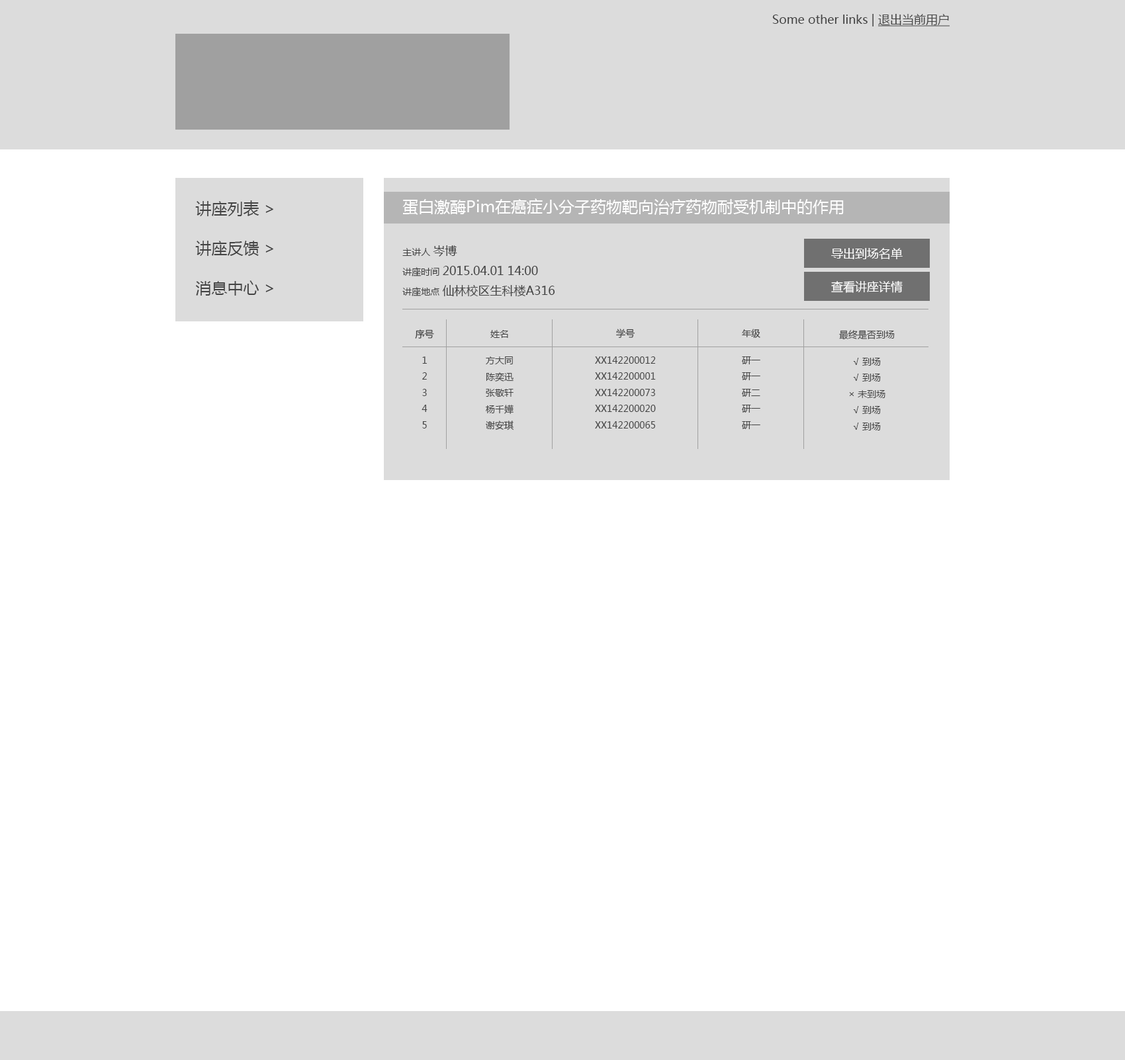
<style>
.page{position:relative;width:1125px;height:1060px;background:#ffffff}
.page>*{position:absolute;margin:0}
.t1{font:11.9px "MicrosoftYaHei";color:#434343}
.t2{font:11.9px "MicrosoftYaHei";color:#434343;text-decoration:underline}
.t3{font:15.9px/39.7px "MicrosoftYaHei";color:#434343}
.t4{font:15.9px "MicrosoftYaHei";color:#ffffff}
.t5{font:11.9px/19.8px "MicrosoftYaHei";color:#434343}
.t6{font:9.3px/19.8px "MicrosoftYaHei";color:#434343}
.t7{font:11.9px/15.9px "MicrosoftYaHei";color:#434343}
.t8{font:11.9px "MicrosoftYaHei";color:#ffffff}
.t9{font:9.3px "MicrosoftYaHei";color:#434343}
</style>
<div class="page">
<p class="t1" style="left:772px;top:14px;width:177px;height:12px">Some other links | <span class="t2">退出当前用户</span></p>
<p class="t3" style="left:195px;top:200px;width:78px;height:96px">讲座列表 &gt;<br>讲座反馈 &gt;<br>消息中心 &gt;</p>
<p class="t4" style="left:402px;top:198px;width:441px;height:17px">蛋白激酶Pim在癌症小分子药物靶向治疗药物耐受机制中的作用</p>
<p class="t5" style="left:402px;top:245px;width:153px;height:51px"><span class="t6">主讲人 </span><span class="t7">岑博</span><span class="t6"><br>讲座时间 </span>2015.04.01 14:00<br><span class="t6">讲座地点 </span>仙林校区生科楼A316</p>
<p class="t8" style="left:831px;top:248px;width:71px;height:11px">导出到场名单</p>
<p class="t8" style="left:831px;top:280px;width:71px;height:13px">查看讲座详情</p>
<p class="t9" style="left:415px;top:329px;width:19px;height:10px">序号</p>
<p class="t9" style="left:616px;top:329px;width:19px;height:9px">学号</p>
<p class="t9" style="left:742px;top:329px;width:18px;height:9px">年级</p>
<p class="t9" style="left:490px;top:330px;width:18px;height:8px">姓名</p>
<p class="t9" style="left:839px;top:330px;width:55px;height:10px">最终是否到场</p>
<p class="t9" style="left:421px;top:357px;width:6px;height:72px;text-align:center">1<br>2<br>3<br>4<br>5</p>
<p class="t9" style="left:486px;top:357px;width:27px;height:74px;text-align:center">方大同<br>陈奕迅<br>张敬轩<br>杨千嬅<br>谢安琪</p>
<p class="t9" style="left:595px;top:357px;width:61px;height:72px;text-align:center">XX142200012<br>XX142200001<br>XX142200073<br>XX142200020<br>XX142200065</p>
<p class="t9" style="left:742px;top:357px;width:18px;height:72px;text-align:center">研一<br>研一<br>研二<br>研一<br>研一</p>
<p class="t9" style="left:849px;top:358px;width:36px;height:73px;text-align:center">√ 到场<br>√ 到场<br>× 未到场<br>√ 到场<br>√ 到场</p>
</div>
